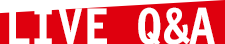
<style>
.page{position:relative;width:225px;height:44px;background:#df000e}
.page>*{position:absolute;margin:0}
.t1{font:53px "LetterGothic12PitchBT-Bold";color:#ffffff;text-transform:uppercase}
</style>
<div class="page">
<p class="t1" style="left:9px;top:7px;width:206px;height:38px">Live 0&amp;a</p>
</div>
